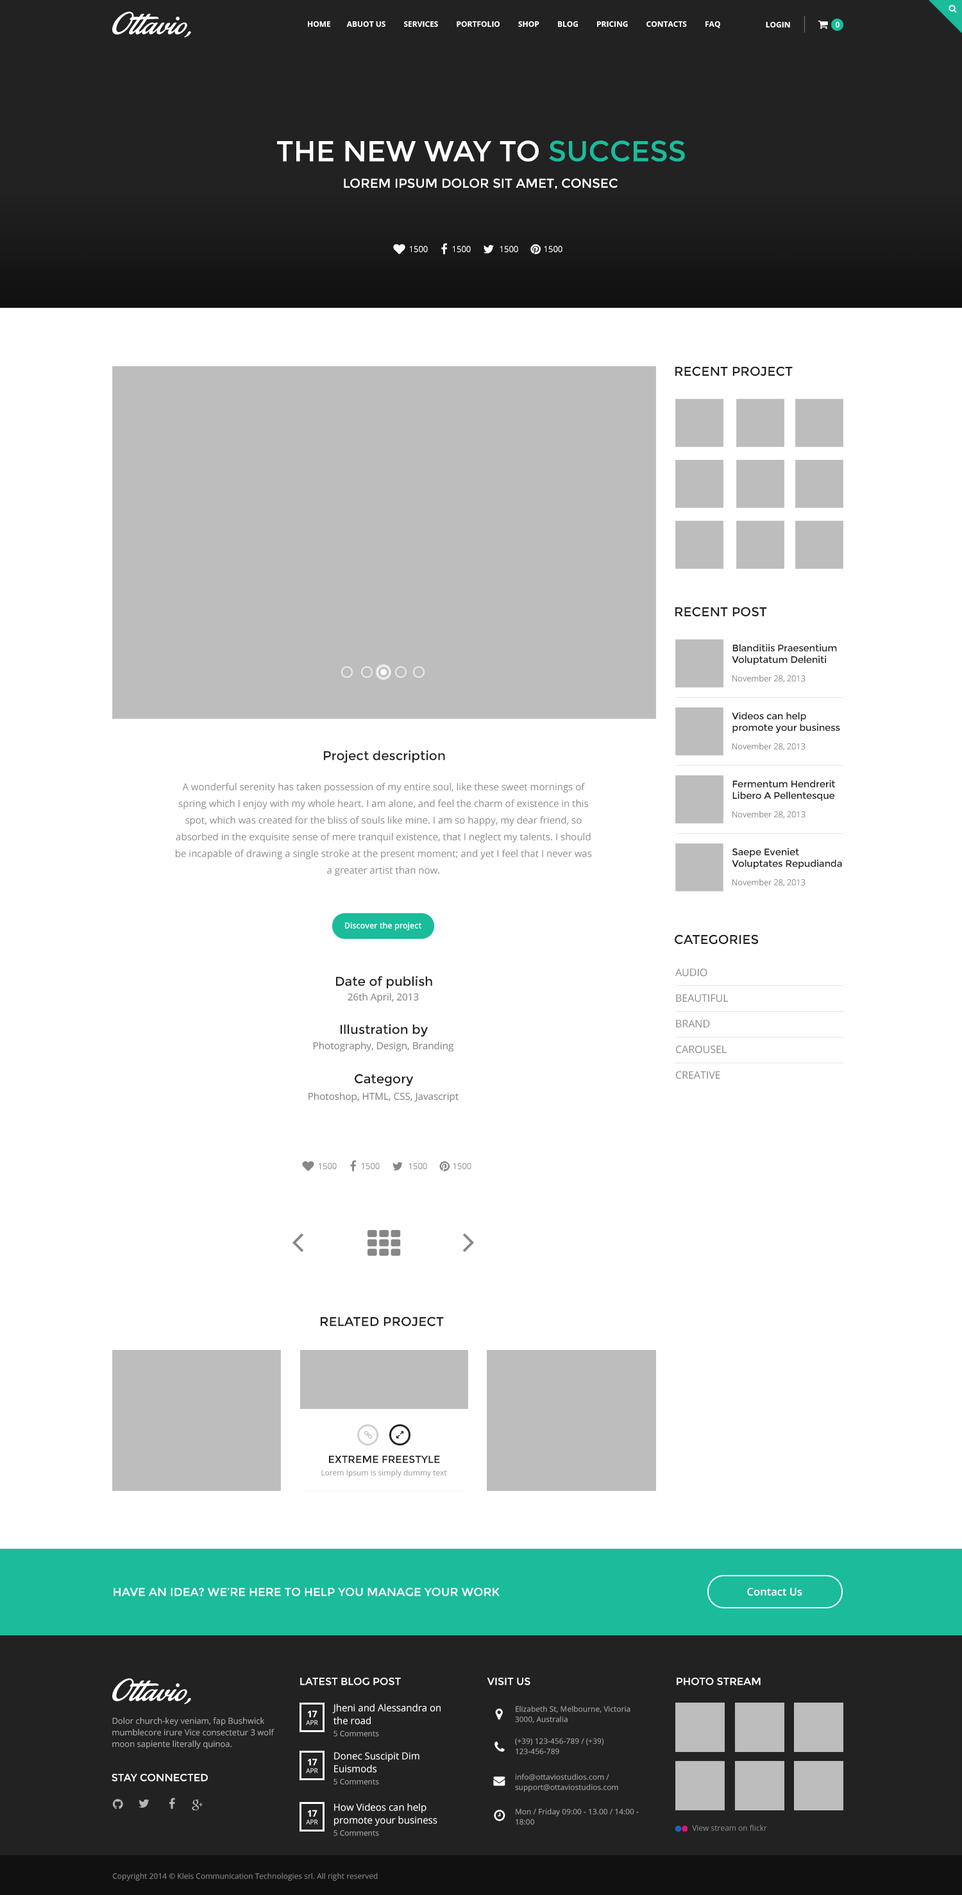
<style>
.page{position:relative;width:962px;height:1895px;background:#ffffff}
.page>*{position:absolute;margin:0}
.t1{font:7.7px "OpenSans-Bold";color:#ffffff;text-transform:uppercase}
.t2{font:7.7px "OpenSans-Semibold";color:#ffffff;text-transform:uppercase}
.t3{font:28.9px "Montserrat-Regular";color:#ffffff;text-transform:uppercase}
.t4{font:28.9px "Montserrat-Regular";color:#1abc9c;text-transform:uppercase}
.t5{font:12.8px "Montserrat-Regular";color:#ffffff;text-transform:uppercase}
.t6{font:8.3px "OpenSans";color:#ffffff}
.t7{font:12.8px "Montserrat-Regular";color:#222222;text-transform:uppercase}
.t8{font:9.6px/11.5px "Montserrat-Regular";letter-spacing:-0.017em;color:#222222}
.t9{font:8.3px "OpenSans";letter-spacing:-0.017em;color:#878787}
.t10{font:12.8px "Montserrat-Regular";color:#222222}
.t11{font:9.6px/16.7px "OpenSans";color:#878787}
.t12{font:8.2px "OpenSans-Semibold";color:#ffffff}
.t13{font:10.3px/25.7px "OpenSans";color:#878787;text-transform:uppercase}
.t14{font:9.6px "OpenSans";color:#878787}
.t15{font:8.3px "OpenSans";color:#878787}
.t16{font:10.3px "Montserrat-Regular";color:#222222;text-transform:uppercase}
.t17{font:7.7px "OpenSans";color:#8d8d8d}
.t18{font:11.5px "Montserrat-Regular";color:#ffffff;text-transform:uppercase}
.t19{font:10.7px "OpenSans-Semibold";color:#ffffff}
.t20{font:10.3px "Montserrat-Regular";color:#ffffff;text-transform:uppercase}
.t21{font:9.6px/12.8px "OpenSans";color:#ffffff}
.t22{font:7.7px/10.3px "OpenSans";color:#a8a8a8}
.t23{font:8.3px/11.5px "OpenSans";color:#a8a8a8}
.t24{font:6.4px "OpenSans";color:#ffffff;text-transform:uppercase}
.t25{font:9px "OpenSans-Bold";color:#ffffff;text-transform:uppercase}
.t26{font:7.7px "OpenSans";color:#a9a9a9}
.t27{font:7.7px "OpenSans";color:#878787}
</style>
<div class="page">
<p class="t1" style="left:308px;top:21px;width:412px;height:7px">Home        Abuot us         Services         Portfolio         Shop         Blog         Pricing         Contacts         Faq</p>
<p class="t1" style="left:766px;top:22px;width:24px;height:6px">Login</p>
<p class="t2" style="left:836px;top:22px;width:4px;height:6px">0</p>
<p class="t3" style="left:277px;top:140px;width:408px;height:22px">The New Way to <span class="t4">Success</span></p>
<p class="t5" style="left:344px;top:178px;width:274px;height:11px">Lorem ipsum dolor sit amet, consec</p>
<p class="t6" style="left:409px;top:246px;width:19px;height:7px">1500</p>
<p class="t6" style="left:452px;top:246px;width:19px;height:7px">1500</p>
<p class="t6" style="left:500px;top:246px;width:18px;height:7px">1500</p>
<p class="t6" style="left:544px;top:246px;width:19px;height:7px">1500</p>
<p class="t7" style="left:675px;top:366px;width:118px;height:11px">RECENT PROJECT</p>
<p class="t7" style="left:675px;top:607px;width:92px;height:10px">Recent Post</p>
<p class="t8" style="left:732px;top:644px;width:105px;height:21px">Blanditiis Praesentium <br>Voluptatum Deleniti</p>
<p class="t9" style="left:733px;top:675px;width:73px;height:8px">November 28, 2013</p>
<p class="t8" style="left:732px;top:712px;width:108px;height:21px">Videos can help <br>promote your business</p>
<p class="t9" style="left:733px;top:743px;width:73px;height:8px">November 28, 2013</p>
<p class="t10" style="left:324px;top:750px;width:121px;height:13px">Project description</p>
<p class="t11" style="left:176px;top:783px;width:416px;height:93px;text-align:center">A wonderful serenity has taken possession of my entire soul, like these sweet mornings of spring which I enjoy with my whole heart. I am alone, and feel the charm of existence in this spot, which was created for the bliss of souls like mine. I am so happy, my dear friend, so absorbed in the exquisite sense of mere tranquil existence, that I neglect my talents. I should be incapable of drawing a single stroke at the present moment; and yet I feel that I never was a greater artist than now.</p>
<p class="t8" style="left:733px;top:780px;width:103px;height:21px">Fermentum Hendrerit <br>Libero A Pellentesque</p>
<p class="t9" style="left:733px;top:811px;width:73px;height:8px">November 28, 2013</p>
<p class="t8" style="left:732px;top:848px;width:110px;height:21px">Saepe Eveniet <br>Voluptates Repudianda</p>
<p class="t9" style="left:733px;top:879px;width:73px;height:8px">November 28, 2013</p>
<p class="t12" style="left:345px;top:922px;width:76px;height:9px">Discover the project</p>
<p class="t7" style="left:675px;top:935px;width:83px;height:10px">Categories</p>
<p class="t10" style="left:336px;top:976px;width:96px;height:13px">Date of publish</p>
<p class="t13" style="left:675px;top:969px;width:54px;height:111px">Audio<br>Beautiful<br>Brand<br>Carousel<br>Creative</p>
<p class="t14" style="left:348px;top:993px;width:71px;height:10px">26th April, 2013</p>
<p class="t10" style="left:341px;top:1024px;width:87px;height:13px">Illustration by</p>
<p class="t14" style="left:313px;top:1042px;width:141px;height:10px">Photography, Design, Branding</p>
<p class="t10" style="left:355px;top:1074px;width:59px;height:13px">Category</p>
<p class="t14" style="left:309px;top:1092px;width:150px;height:11px">Photoshop, HTML, CSS, Javascript</p>
<p class="t15" style="left:318px;top:1163px;width:19px;height:7px">1500</p>
<p class="t15" style="left:361px;top:1163px;width:19px;height:7px">1500</p>
<p class="t15" style="left:409px;top:1163px;width:18px;height:7px">1500</p>
<p class="t15" style="left:453px;top:1163px;width:18px;height:7px">1500</p>
<p class="t7" style="left:321px;top:1317px;width:123px;height:10px">Related project</p>
<p class="t16" style="left:329px;top:1455px;width:111px;height:9px">Extreme freestyle</p>
<p class="t17" style="left:321px;top:1470px;width:126px;height:8px">Lorem Ipsum is simply dummy text</p>
<p class="t18" style="left:114px;top:1588px;width:386px;height:9px">HAVE AN IDEA? WE’RE HERE TO HELP YOU MANAGE YOUR WORK</p>
<p class="t19" style="left:747px;top:1588px;width:55px;height:9px">Contact Us</p>
<p class="t20" style="left:300px;top:1678px;width:101px;height:8px">Latest blog post</p>
<p class="t20" style="left:487px;top:1678px;width:43px;height:8px">Visit US</p>
<p class="t20" style="left:677px;top:1678px;width:84px;height:8px">Photo stream</p>
<p class="t21" style="left:332px;top:1704px;width:109px;height:21px">Jheni and Alessandra on <br>the road</p>
<p class="t22" style="left:515px;top:1706px;width:116px;height:18px">Elizabeth St, Melbourne, Victoria 3000, Australia</p>
<p class="t23" style="left:112px;top:1718px;width:163px;height:31px">Dolor church-key veniam, fap Bushwick mumblecore irure Vice consectetur 3 wolf moon sapiente literally quinoa.</p>
<p class="t24" style="left:306px;top:1720px;width:12px;height:5px">apr</p>
<p class="t25" style="left:307px;top:1711px;width:11px;height:7px">17</p>
<p class="t26" style="left:334px;top:1731px;width:45px;height:6px">5 Comments</p>
<p class="t22" style="left:515px;top:1738px;width:89px;height:17px">(+39) 123-456-789 / (+39) 123-456-789</p>
<p class="t21" style="left:334px;top:1752px;width:86px;height:21px">Donec Suscipit Dim <br>Euismods</p>
<p class="t24" style="left:306px;top:1768px;width:12px;height:6px">apr</p>
<p class="t25" style="left:307px;top:1759px;width:11px;height:7px">17</p>
<p class="t20" style="left:112px;top:1774px;width:96px;height:8px">Stay connected</p>
<p class="t26" style="left:334px;top:1779px;width:45px;height:6px">5 Comments</p>
<p class="t22" style="left:515px;top:1774px;width:103px;height:19px">info@ottaviostudios.com / support@ottaviostudios.com</p>
<p class="t21" style="left:334px;top:1804px;width:103px;height:22px">How Videos can help <br>promote your business</p>
<p class="t25" style="left:307px;top:1810px;width:11px;height:7px">17</p>
<p class="t22" style="left:516px;top:1809px;width:123px;height:17px">Mon / Friday 09:00 - 13.00 / 14:00 - 18:00</p>
<p class="t24" style="left:306px;top:1820px;width:12px;height:5px">apr</p>
<p class="t27" style="left:692px;top:1825px;width:75px;height:6px">View stream on flickr</p>
<p class="t26" style="left:334px;top:1831px;width:45px;height:5px">5 Comments</p>
<p class="t27" style="left:113px;top:1873px;width:265px;height:8px">Copyright 2014 © Kleis Communication Technologies srl. All right reserved</p>
</div>
